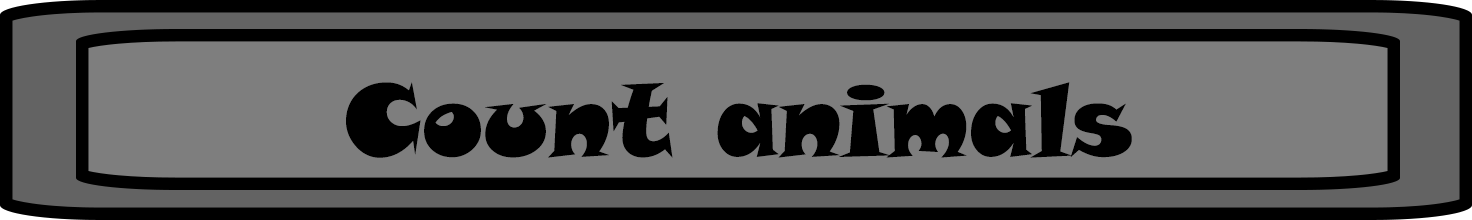
<style>
.page{position:relative;width:1472px;height:220px;background:#7e7e7e}
.page>*{position:absolute;margin:0}
.t1{font:100px "SnapITC-Regular";color:#000000}
</style>
<div class="page">
<p class="t1" style="left:346px;top:82px;width:786px;height:76px">Count animals</p>
</div>
